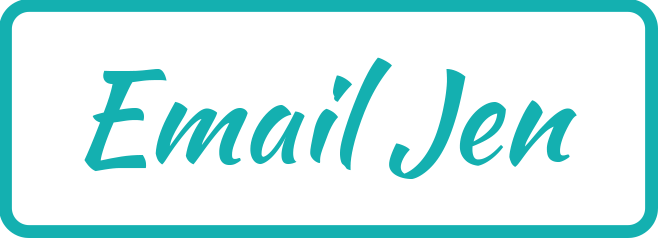
<style>
.page{position:relative;width:660px;height:240px;background:#ffffff}
.page>*{position:absolute;margin:0}
.t1{font:125px "KaushanScript-Regular";color:#14b0b0}
</style>
<div class="page">
<p class="t1" style="left:84px;top:57px;width:493px;height:122px">Email Jen</p>
</div>
